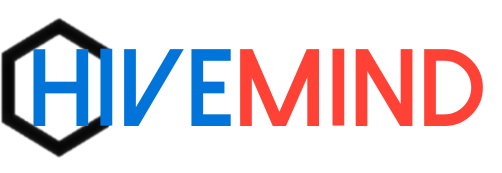
<style>
.page{position:relative;width:502px;height:173px;background:#ffffff}
.page>*{position:absolute;margin:0}
.t1{font:110px "DolceVitaHeavy-Bold";color:#0074d9}
.t2{font:110px "DolceVitaHeavy-Bold";color:#ff4136}
</style>
<div class="page">
<p class="t1" style="left:33px;top:48px;width:450px;height:78px">hive<span class="t2">Mind</span></p>
</div>
